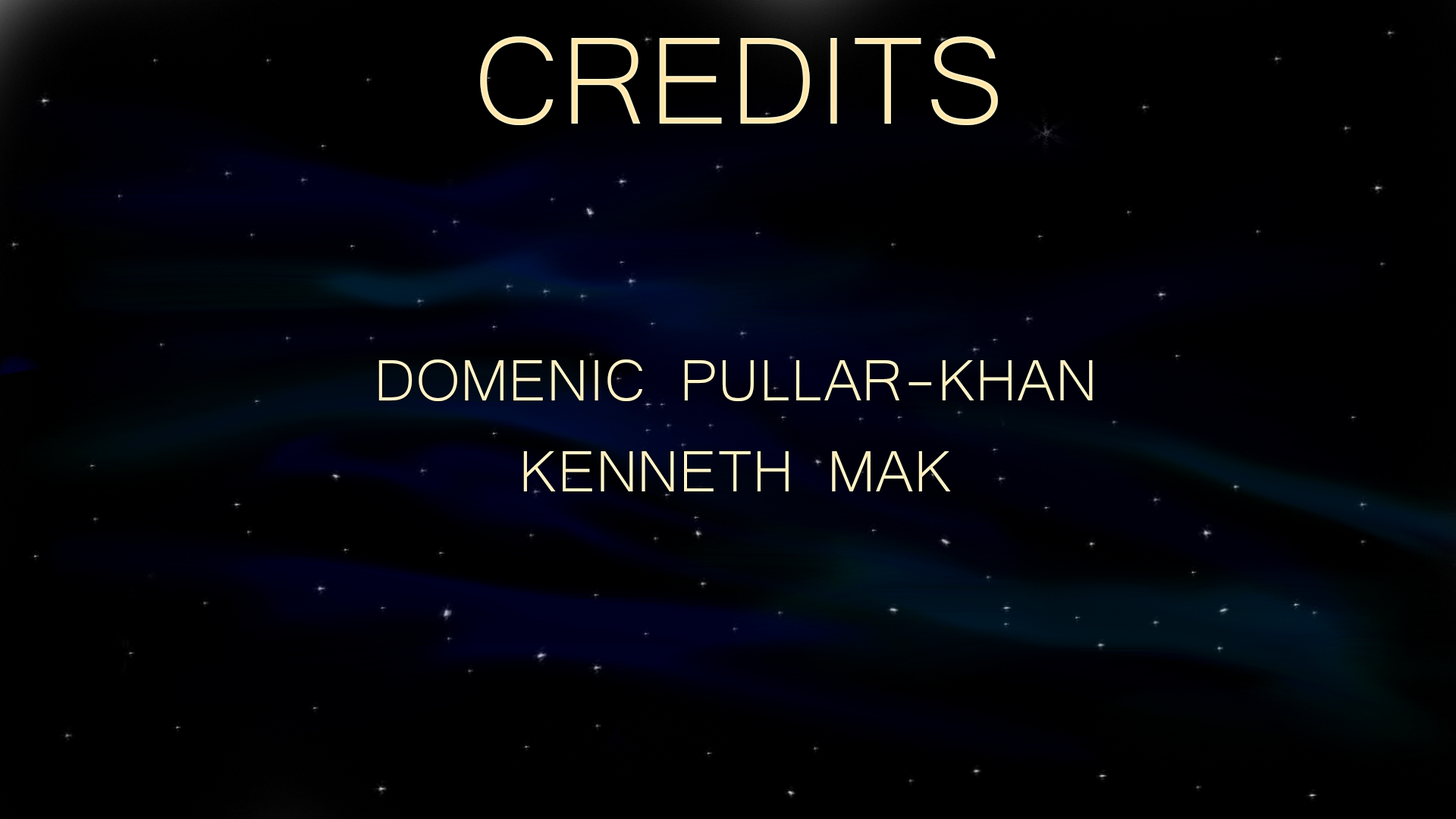
<style>
.page{position:relative;width:1456px;height:819px;background:#000000}
.page>*{position:absolute;margin:0}
.t1{font:159.9px "Microsoft-Yi-Baiti";color:#ffeab1}
.t2{font:75.8px "Microsoft-Yi-Baiti";color:#fff3c9}
</style>
<div class="page">
<p class="t1" style="left:480px;top:36px;width:518px;height:89px">CREDITS</p>
<p class="t2" style="left:378px;top:359px;width:715px;height:132px;text-align:center">DOMENIC PULLAR-KHAN<br>KENNETH MAK</p>
</div>
